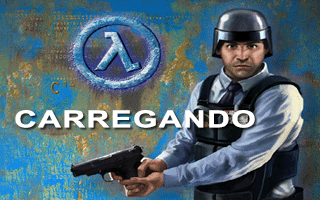
<style>
.page{position:relative;width:320px;height:200px}
.page>*{position:absolute;margin:0}
.t1{font:23.5px "Arial-BoldMT";letter-spacing:0.04em;color:#ffffff;text-transform:uppercase;scale:1.35 1}
</style>
<div class="page">
<p class="t1" style="left:15px;top:110px;width:240px;height:18px">CARREGANDO</p>
</div>
